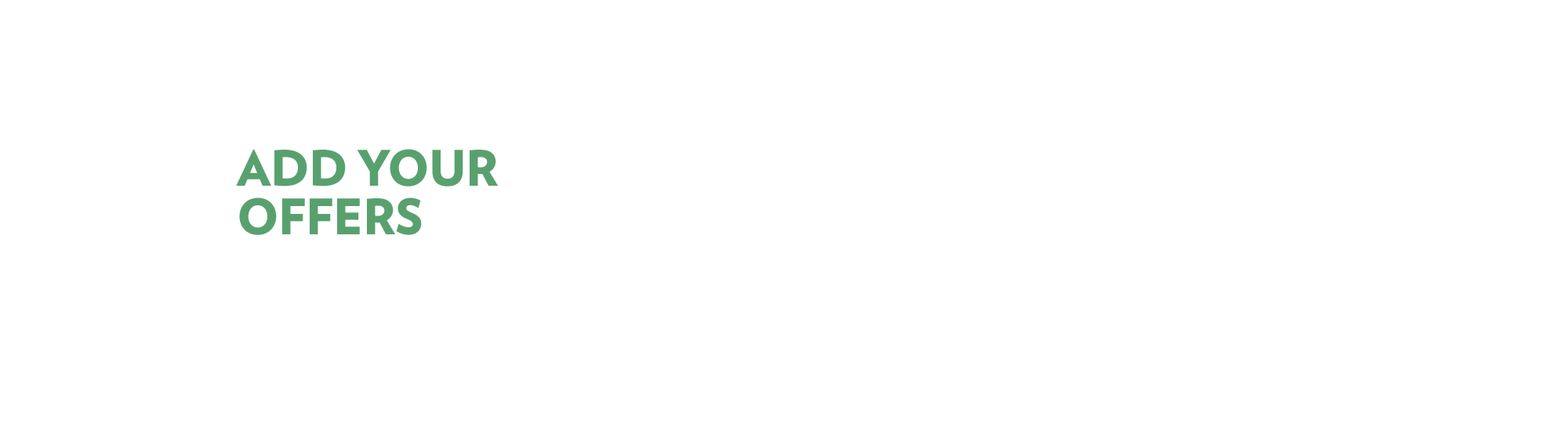
<style>
.page{position:relative;width:1568px;height:431px;background:#ffffff}
.page>*{position:absolute;margin:0}
.t1{font:48.9px/48.6px "Verlag-Black";letter-spacing:-0.011em;color:#58a16e;text-transform:uppercase}
</style>
<div class="page">
<p class="t1" style="left:236px;top:149px;width:262px;height:86px">add your <br>offers</p>
</div>
